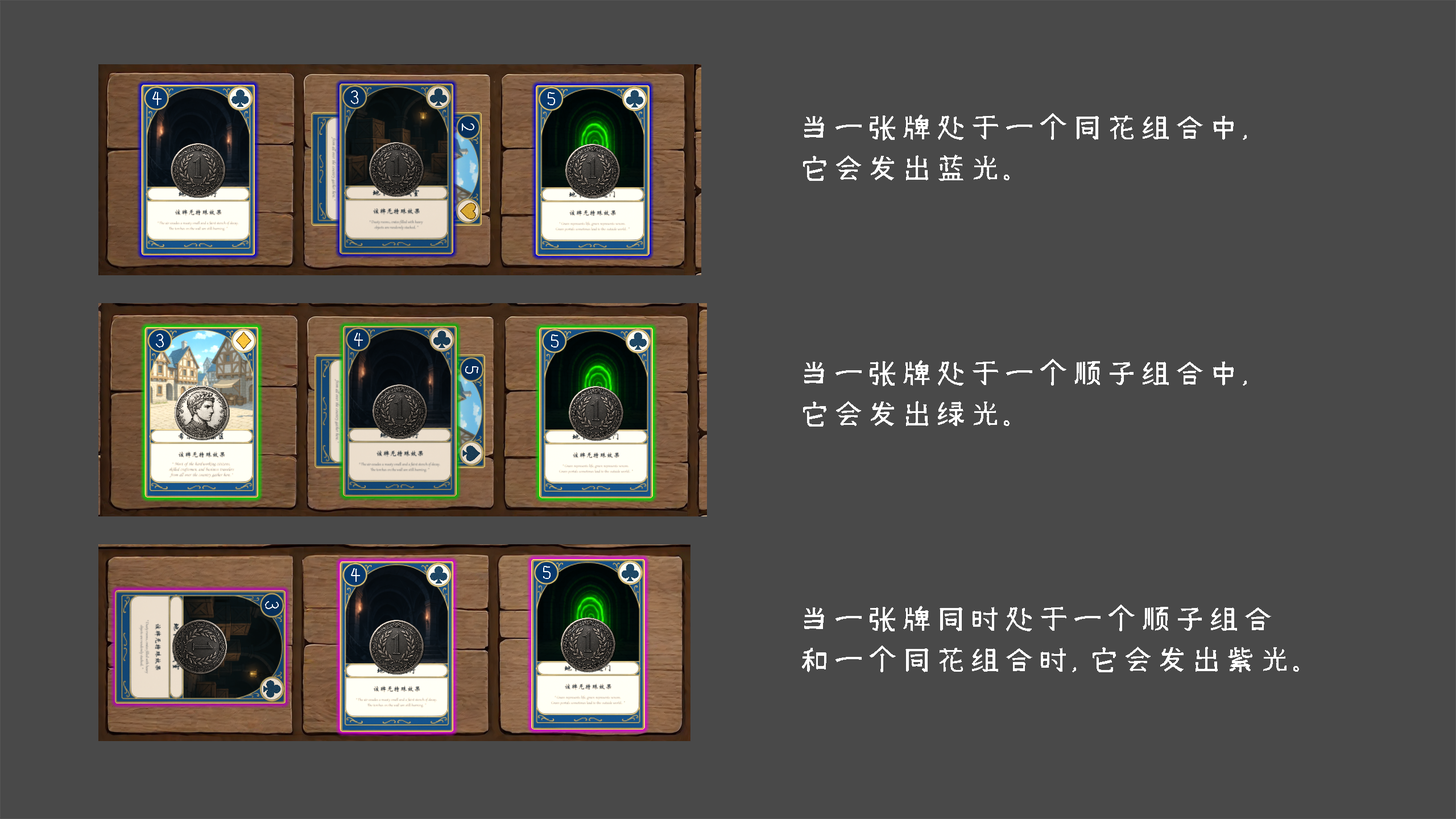
<style>
.page{position:relative;width:1456px;height:819px;background:#494949}
.page>*{position:absolute;margin:0}
.t1{font:34.1px "Xim-Sans-Brahmic";color:#ffffff}
</style>
<div class="page">
<p class="t1" style="left:802px;top:113px;width:497px;height:559px">当一张牌处于一个同花组合中，<br>它会发出蓝光。<br><br><br><br><br>当一张牌处于一个顺子组合中，<br>它会发出绿光。<br><br><br><br><br>当一张牌同时处于一个顺子组合<br>和一个同花组合时，它会发出紫光。</p>
</div>
